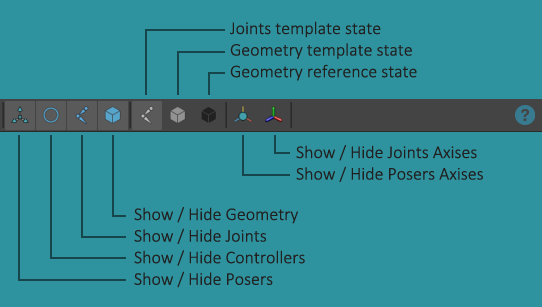
<style>
.page{position:relative;width:542px;height:307px;background:#2f939f}
.page>*{position:absolute;margin:0}
.t1{font:18px "Calibri-Light";color:#202020}
.t2{font:18px "Calibri-Light";color:#212121}
</style>
<div class="page">
<p class="t1" style="left:230px;top:21px;width:187px;height:60px">Joints template state <br>Geometry template state<br>Geometry reference state</p>
<p class="t1" style="left:296px;top:145px;width:187px;height:37px">Show / Hide Joints Axises<br>Show / Hide Posers Axises</p>
<p class="t2" style="left:134px;top:207px;width:171px;height:81px">Show / Hide Geometry<br>Show / Hide Joints<br>Show / Hide Controllers<br>Show / Hide Posers</p>
</div>
